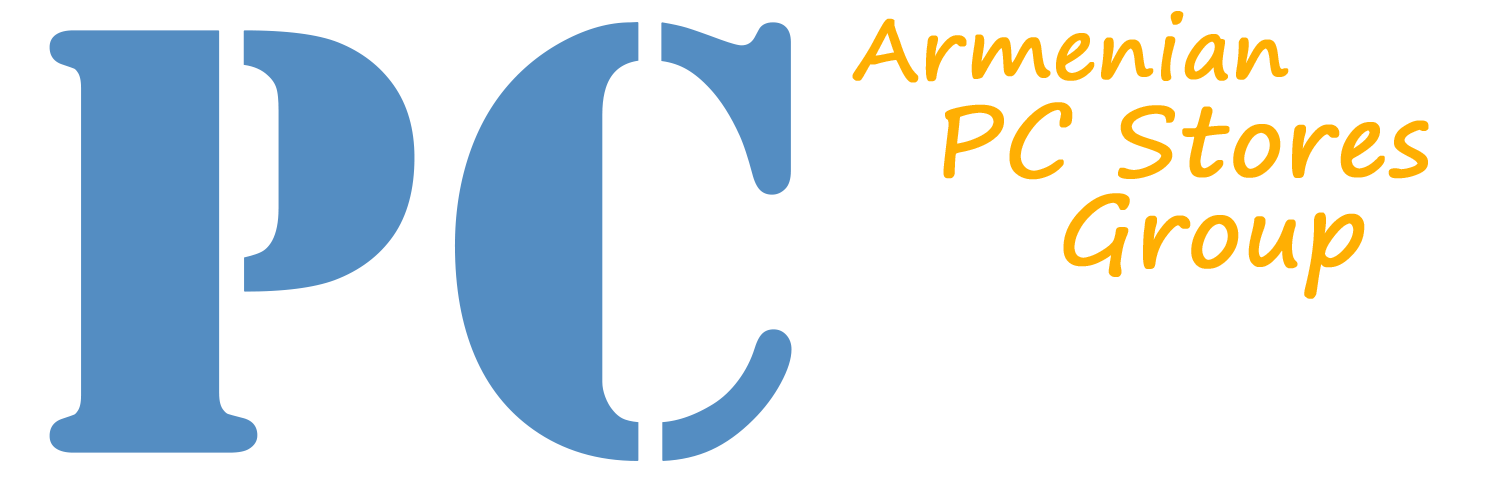
<style>
.page{position:relative;width:1500px;height:477px;background:#ffffff}
.page>*{position:absolute;margin:0}
.t1{font:82.8px "SegoePrint";color:#ffaf03;font-weight:bold}
.t2{font:631.4px "Stencil";color:#548dc2;font-weight:bold}
.t3{font:95.9px "SegoePrint";color:#ffaf03;font-weight:bold}
</style>
<div class="page">
<p class="t1" style="left:852px;top:11px;width:437px;height:72px">Armenian</p>
<p class="t2" style="left:49px;top:22px;width:743px;height:439px">PC</p>
<p class="t3" style="left:943px;top:102px;width:486px;height:78px">PC Stores</p>
<p class="t3" style="left:1063px;top:193px;width:302px;height:106px">Group</p>
</div>
